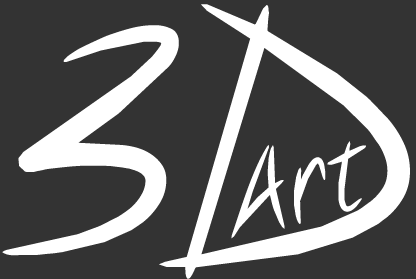
<style>
.page{position:relative;width:416px;height:279px;background:#333333}
.page>*{position:absolute;margin:0}
.t1{font:349.3px "Notethis";color:#ffffff}
.t2{font:105px "Notethis";color:#ffffff}
</style>
<div class="page">
<p class="t1" style="left:2px;top:4px;width:408px;height:275px">3D</p>
<p class="t2" style="left:231px;top:141px;width:135px;height:98px;rotate:-17deg">Art</p>
</div>
